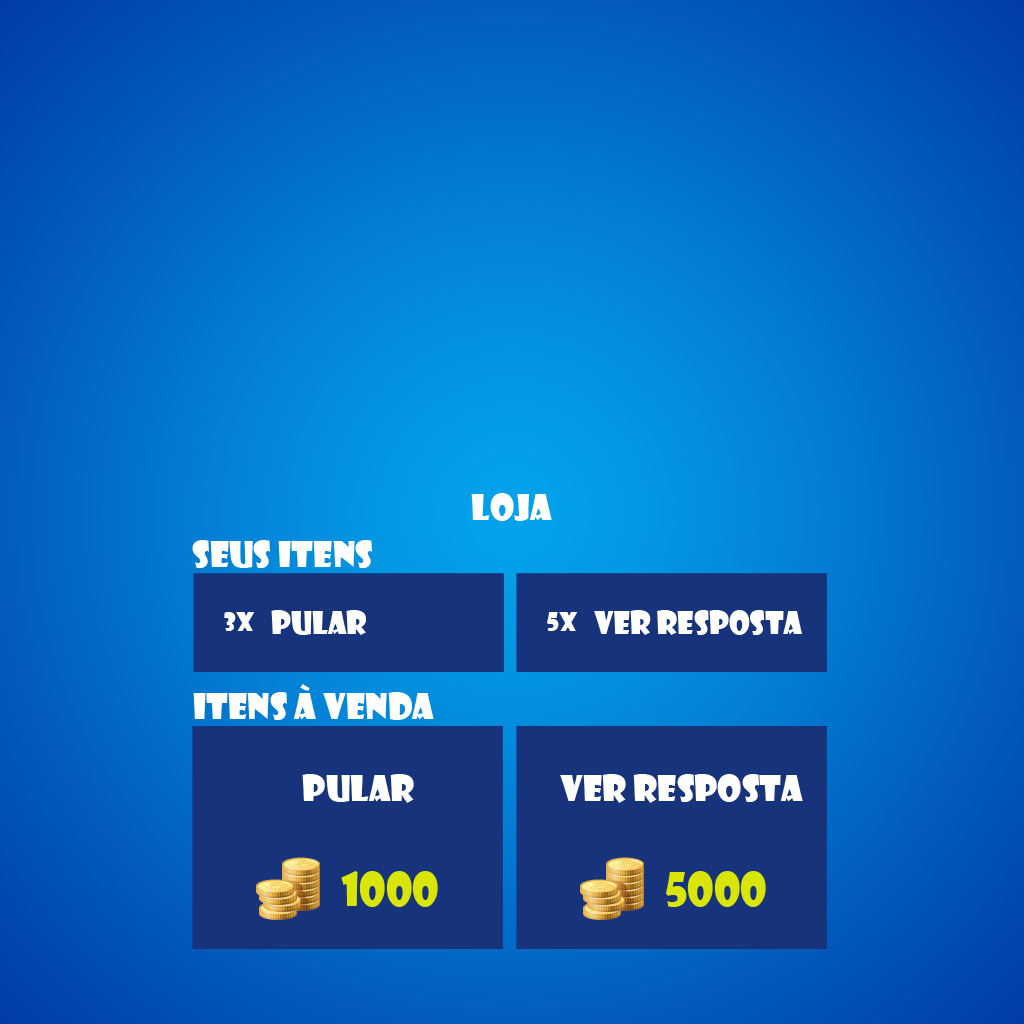
<style>
.page{position:relative;width:1024px;height:1024px}
.page>*{position:absolute;margin:0}
.t1{font:35px "ShowcardGothic-Reg";color:#ffffff}
.t2{font:25px "ShowcardGothic-Reg";color:#ffffff}
.t3{font:30px "ShowcardGothic-Reg";color:#ffffff}
.t4{font:45px "ShowcardGothic-Reg";color:#d8e506}
</style>
<div class="page">
<p class="t1" style="left:471px;top:493px;width:81px;height:28px">LOJA</p>
<p class="t1" style="left:192px;top:540px;width:180px;height:28px">SEUS ITENS</p>
<p class="t2" style="left:224px;top:612px;width:31px;height:19px">3x</p>
<p class="t3" style="left:271px;top:610px;width:95px;height:25px">PULAR</p>
<p class="t2" style="left:547px;top:612px;width:31px;height:19px">5x</p>
<p class="t3" style="left:594px;top:610px;width:208px;height:25px">Ver resposta</p>
<p class="t1" style="left:193px;top:684px;width:241px;height:36px">ITENS à Venda</p>
<p class="t1" style="left:302px;top:774px;width:112px;height:29px">Pular</p>
<p class="t1" style="left:560px;top:774px;width:243px;height:29px">Ver resposta</p>
<p class="t4" style="left:341px;top:871px;width:97px;height:36px">1000</p>
<p class="t4" style="left:666px;top:871px;width:100px;height:36px">5000</p>
</div>
